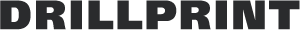
<style>
.page{position:relative;width:300px;height:50px;background:#ffffff}
.page>*{position:absolute;margin:0}
.t1{font:41px "FrutigerLTStd-UltraBlack";letter-spacing:0.066em;color:#2a2b2d}
</style>
<div class="page">
<p class="t1" style="left:0px;top:0px;width:300px;height:30px">DRILLPRINT</p>
</div>
